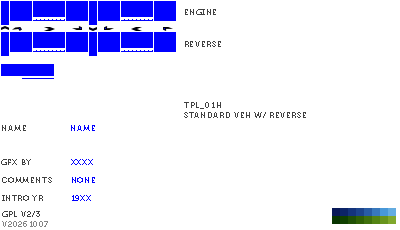
<style>
.page{position:relative;width:400px;height:230px;background:#ffffff}
.page>*{position:absolute;margin:0}
.t1{font:8px "Museo700-Regular";letter-spacing:0.075em;color:#404040;text-transform:uppercase}
.t2{font:8px "Museo700-Regular";letter-spacing:0.075em;color:#0000ff;text-transform:uppercase}
.t3{font:8px "Museo700-Regular";letter-spacing:0.075em;color:#848484;text-transform:uppercase}
</style>
<div class="page">
<p class="t1" style="left:185px;top:9px;width:31px;height:6px">engine</p>
<p class="t1" style="left:185px;top:41px;width:36px;height:6px">reverse</p>
<p class="t1" style="left:184px;top:102px;width:122px;height:16px">tpl_01h<br>standard veh w/ reverse</p>
<p class="t1" style="left:2px;top:125px;width:24px;height:6px">name</p>
<p class="t2" style="left:71px;top:125px;width:24px;height:6px">name</p>
<p class="t1" style="left:1px;top:159px;width:30px;height:6px">gfx by</p>
<p class="t2" style="left:71px;top:159px;width:22px;height:6px">xxxx</p>
<p class="t1" style="left:2px;top:177px;width:50px;height:6px">comments</p>
<p class="t2" style="left:72px;top:177px;width:23px;height:6px">none</p>
<p class="t1" style="left:2px;top:195px;width:41px;height:6px">intro yr</p>
<p class="t2" style="left:72px;top:195px;width:19px;height:6px">19xx</p>
<p class="t3" style="left:2px;top:221px;width:46px;height:6px">v20261007</p>
<p class="t1" style="left:2px;top:211px;width:38px;height:6px">gpl v2/3</p>
</div>
